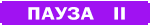
<style>
.page{position:relative;width:150px;height:25px;background:#a012f2}
.page>*{position:absolute;margin:0}
.t1{font:18.1px "FranklinGothic-Demi";letter-spacing:0.03em;color:#ffffff;scale:1.2 1}
</style>
<div class="page">
<p class="t1" style="left:28px;top:7px;width:97px;height:13px">ПАУЗА   II</p>
</div>
